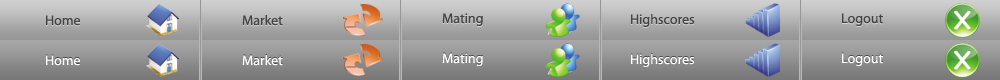
<style>
.page{position:relative;width:1000px;height:80px}
.page>*{position:absolute;margin:0}
.t1{font:14px "MyriadPro-Regular";color:#444444}
.t2{font:14px "MyriadPro-Regular";color:#ffffff}
.t3{font:14px "MyriadPro-Regular";color:#fefefe}
</style>
<div class="page">
<p class="t1" style="left:46px;top:15px;width:34px;height:11px">Home</p>
<p class="t1" style="left:242px;top:15px;width:41px;height:11px">Market</p>
<p class="t1" style="left:442px;top:13px;width:41px;height:13px">Mating</p>
<p class="t1" style="left:631px;top:14px;width:64px;height:13px">Highscores</p>
<p class="t1" style="left:842px;top:13px;width:41px;height:13px">Logout</p>
<p class="t2" style="left:442px;top:53px;width:41px;height:13px">Mating</p>
<p class="t2" style="left:631px;top:54px;width:64px;height:13px">Highscores</p>
<p class="t2" style="left:842px;top:53px;width:41px;height:13px">Logout</p>
<p class="t2" style="left:46px;top:55px;width:34px;height:11px">Home</p>
<p class="t3" style="left:242px;top:55px;width:41px;height:11px">Market</p>
</div>
